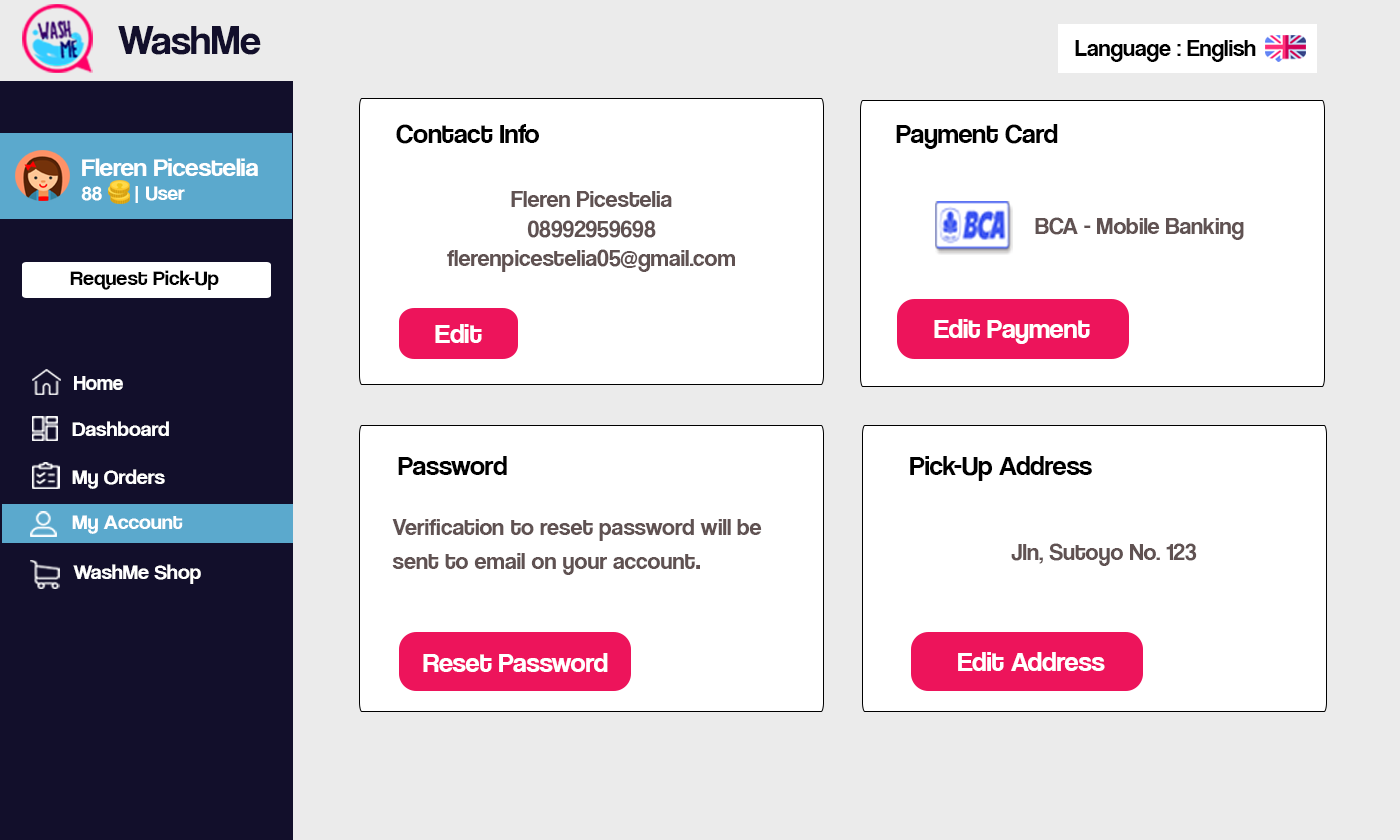
<style>
.page{position:relative;width:1400px;height:840px;background:#ffffff}
.page>*{position:absolute;margin:0}
.t1{font:42px "CoolveticaRg-Regular";color:#120f2b}
.t2{font:24px "CoolveticaRg-Regular";color:#000000}
.t3{font:28px "CoolveticaRg-Regular";color:#000000}
.t4{font:25.2px "CoolveticaRg-Regular";color:#ffffff;scale:1.05 1}
.t5{font:20px "CoolveticaRg-Regular";color:#ffffff;scale:1.05 1}
.t6{font:24.5px "CoolveticaRg-Regular";color:#605252}
.t7{font:21px "CoolveticaRg-Regular";color:#000000;scale:1.05 1}
.t8{font:28px "CoolveticaRg-Regular";color:#ffffff}
.t9{font:21px "CoolveticaRg-Regular";color:#ffffff}
.t10{font:21px "CoolveticaRg-Regular";color:#ffffff;scale:1.05 1}
.t11{font:28px "CoolveticaRg-Regular";color:#605252}
.t12{font:27.9px "CoolveticaRg-Regular";color:#ffffff}
</style>
<div class="page">
<p class="t1" style="left:118px;top:26px;width:143px;height:29px">WashMe</p>
<p class="t2" style="left:1075px;top:40px;width:181px;height:22px">Language : English</p>
<p class="t3" style="left:396px;top:124px;width:143px;height:20px">Contact Info</p>
<p class="t3" style="left:896px;top:124px;width:162px;height:25px">Payment Card</p>
<p class="t4" style="left:81px;top:158px;width:177px;height:45px">Fleren Picestelia<br><span class="t5">88      | User</span></p>
<p class="t6" style="left:447px;top:191px;width:288px;height:81px;text-align:center">Fleren Picestelia<br>08992959698<br>flerenpicestelia05@gmail.com</p>
<p class="t6" style="left:1035px;top:217px;width:209px;height:23px">BCA - Mobile Banking</p>
<p class="t7" style="left:70px;top:270px;width:149px;height:20px">Request Pick-Up</p>
<p class="t8" style="left:435px;top:324px;width:47px;height:19px">Edit</p>
<p class="t8" style="left:934px;top:319px;width:156px;height:25px">Edit Payment</p>
<p class="t9" style="left:74px;top:376px;width:49px;height:14px">Home</p>
<p class="t10" style="left:72px;top:421px;width:97px;height:15px">Dashboard</p>
<p class="t3" style="left:398px;top:456px;width:109px;height:19px">Password</p>
<p class="t3" style="left:910px;top:456px;width:182px;height:25px">Pick-Up Address</p>
<p class="t10" style="left:72px;top:469px;width:93px;height:20px">My Orders</p>
<p class="t10" style="left:72px;top:515px;width:111px;height:19px">My Account</p>
<p class="t6" style="left:392px;top:519px;width:370px;height:56px">Verification to reset password will be <br>sent to email on your account<span class="t11">.</span></p>
<p class="t6" style="left:1011px;top:543px;width:186px;height:23px">Jln, Sutoyo No. 123</p>
<p class="t10" style="left:73px;top:564px;width:128px;height:20px">WashMe Shop</p>
<p class="t8" style="left:423px;top:653px;width:185px;height:19px">Reset Password</p>
<p class="t12" style="left:958px;top:652px;width:147px;height:19px">Edit Address</p>
</div>
